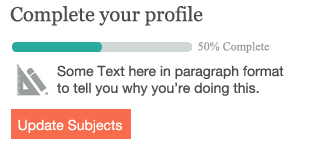
<style>
.page{position:relative;width:310px;height:150px;background:#ffffff}
.page>*{position:absolute;margin:0}
.t1{font:20px "Georgia";color:#4d4d4d}
.t2{font:12px "TimesNewRomanPSMT";color:#999999}
.t3{font:14px "HelveticaNeue";color:#4d4d4d}
.t4{font:14px "HelveticaNeue";color:#ffffff}
</style>
<div class="page">
<p class="t1" style="left:10px;top:6px;width:193px;height:20px">Complete your profile</p>
<p class="t2" style="left:198px;top:42px;width:71px;height:11px">50% Complete</p>
<p class="t3" style="left:57px;top:65px;width:227px;height:31px">Some Text here in paragraph format to tell you why you’re doing this.</p>
<p class="t4" style="left:18px;top:119px;width:104px;height:14px">Update Subjects</p>
</div>
